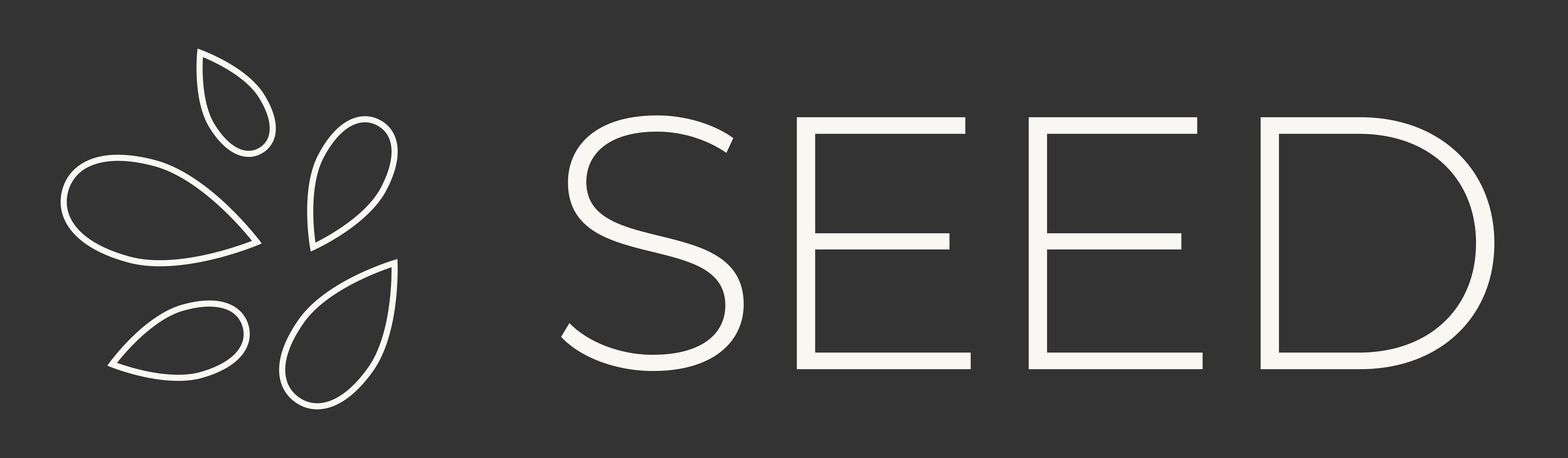
<style>
.page{position:relative;width:1568px;height:458px;background:#333333}
.page>*{position:absolute;margin:0}
.t1{font:360px "Montserrat-Light";letter-spacing:-0.025em;color:#f9f7f2;text-transform:uppercase}
</style>
<div class="page">
<p class="t1" style="left:561px;top:115px;width:933px;height:256px">seed</p>
</div>
